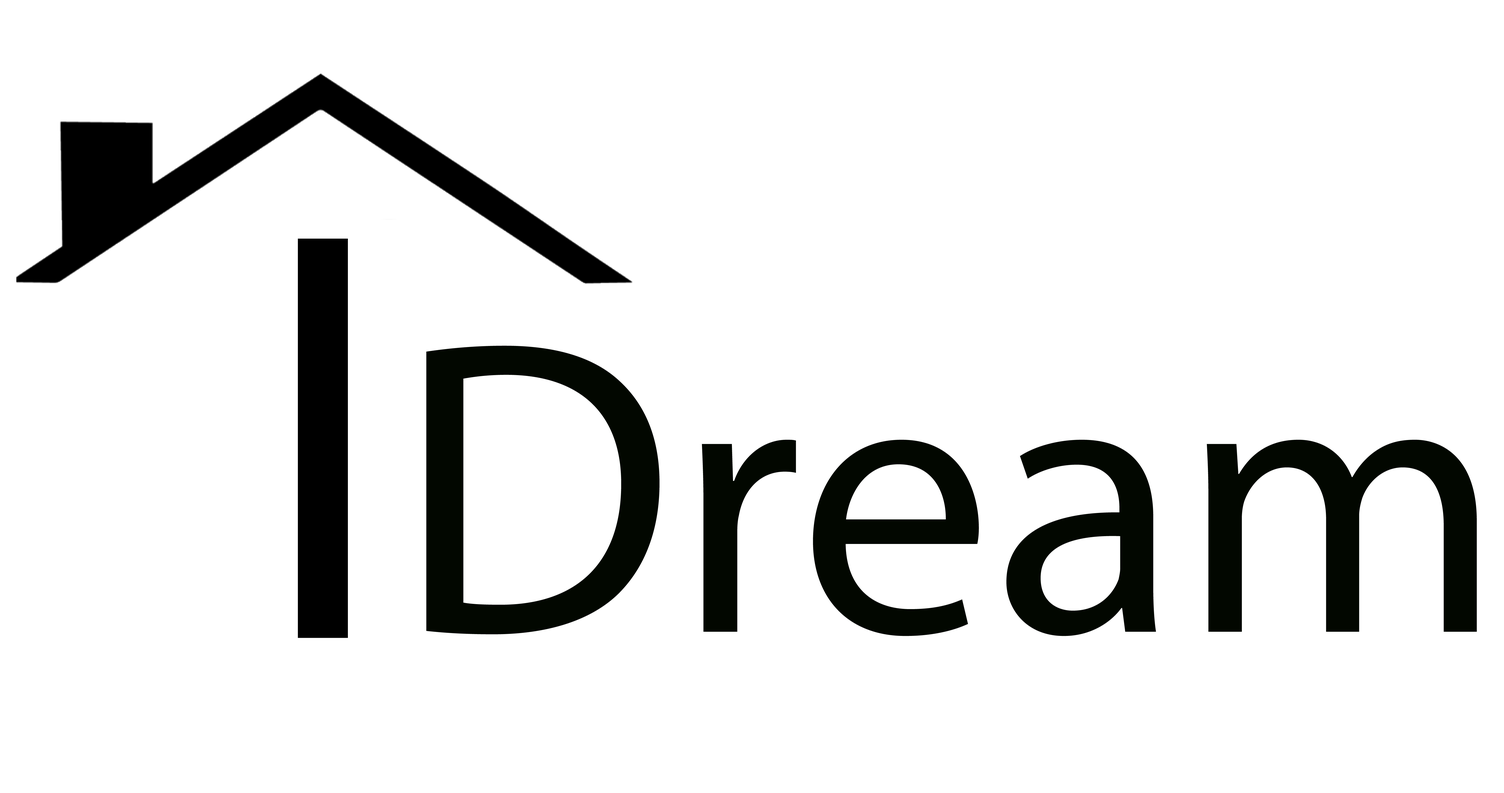
<style>
.page{position:relative;width:1504px;height:793px;background:#ffffff}
.page>*{position:absolute;margin:0}
.t1{font:388.5px "MyriadHebrew-Regular";color:#020700}
.t2{font:421px "MyriadHebrew-Regular";color:#020700}
</style>
<div class="page">
<p class="t1" style="left:426px;top:346px;width:1051px;height:290px"><span class="t2">D</span>ream</p>
</div>
